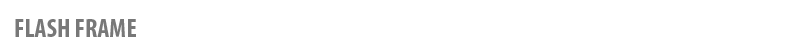
<style>
.page{position:relative;width:790px;height:55px;background:#ffffff}
.page>*{position:absolute;margin:0}
.t1{font:26.4px "MyriadPro-BoldCond";color:#787878}
</style>
<div class="page">
<p class="t1" style="left:15px;top:19px;width:121px;height:18px">FLASH FRAME</p>
</div>
